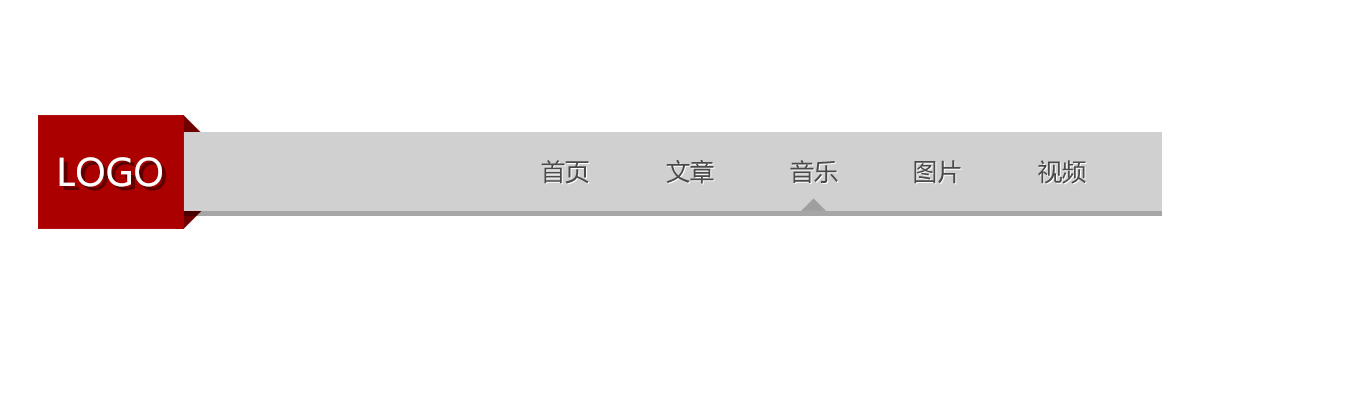
<style>
.page{position:relative;width:1366px;height:400px;background:#ffffff}
.page>*{position:absolute;margin:0}
.t1{font:37.5px "MicrosoftYaHei";color:#ffffff}
.t2{font:24px "MicrosoftYaHei";color:#4a4a4a}
</style>
<div class="page">
<p class="t1" style="left:59px;top:157px;width:103px;height:30px">LOGO</p>
<p class="t2" style="left:541px;top:160px;width:48px;height:24px">首页</p>
<p class="t2" style="left:666px;top:159px;width:48px;height:25px">文章</p>
<p class="t2" style="left:790px;top:160px;width:48px;height:23px">音乐</p>
<p class="t2" style="left:914px;top:160px;width:47px;height:24px">图片</p>
<p class="t2" style="left:1038px;top:160px;width:48px;height:24px">视频</p>
</div>
